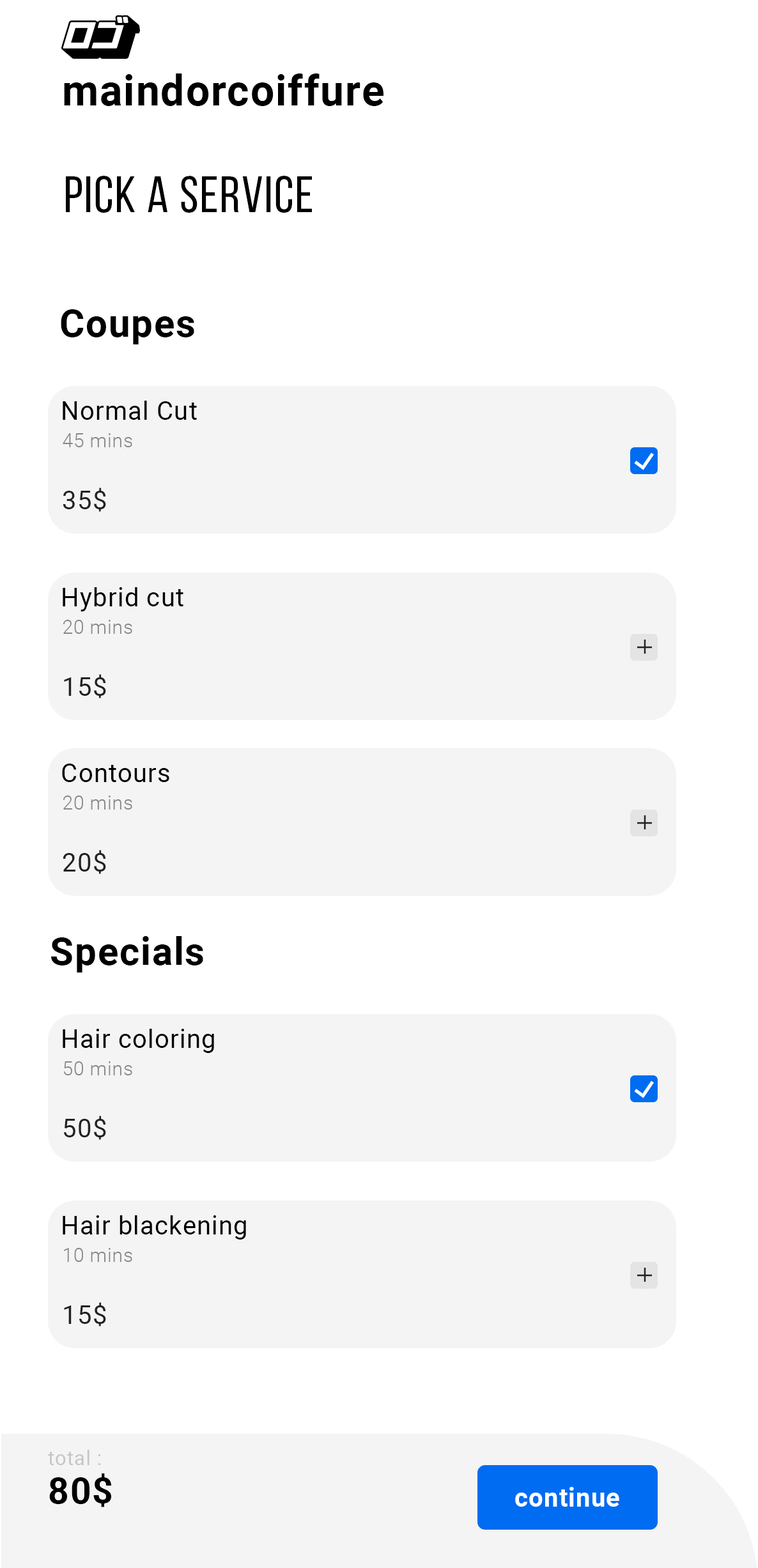
<style>
.page{position:relative;width:758px;height:1568px;background:#ffffff}
.page>*{position:absolute;margin:0}
.t1{font:42.1px "Roboto-Bold";letter-spacing:0.03em;color:#000000}
.t2{font:51.1px "BebasNeueRegular";letter-spacing:0.03em;color:#000000}
.t3{font:38.3px "Roboto-Bold";letter-spacing:0.03em;color:#000000}
.t4{font:25.6px "Roboto-Regular";letter-spacing:0.03em;color:#000000}
.t5{font:19.2px "Roboto-Light";letter-spacing:0.03em;color:#878787}
.t6{font:25.6px "Roboto-Regular";letter-spacing:0.03em;color:#222222}
.t7{font:20.1px "Roboto-Regular";letter-spacing:0.03em;color:#c5c5c5}
.t8{font:36.4px "Roboto-Bold";letter-spacing:0.03em;color:#000000}
.t9{font:25.6px "Roboto-Bold";letter-spacing:0.03em;color:#ffffff}
</style>
<div class="page">
<p class="t1" style="left:64px;top:73px;width:319px;height:33px">maindorcoiffure</p>
<p class="t2" style="left:66px;top:176px;width:246px;height:37px">Pick a service</p>
<p class="t3" style="left:61px;top:309px;width:133px;height:35px">Coupes</p>
<p class="t4" style="left:63px;top:401px;width:134px;height:19px">Normal Cut</p>
<p class="t5" style="left:63px;top:433px;width:69px;height:14px">45 mins</p>
<p class="t6" style="left:63px;top:488px;width:43px;height:24px">35$</p>
<p class="t4" style="left:63px;top:587px;width:120px;height:24px">Hybrid cut</p>
<p class="t5" style="left:63px;top:620px;width:69px;height:14px">20 mins</p>
<p class="t6" style="left:64px;top:674px;width:42px;height:24px">15$</p>
<p class="t4" style="left:62px;top:764px;width:107px;height:18px">Contours</p>
<p class="t5" style="left:63px;top:796px;width:69px;height:14px">20 mins</p>
<p class="t6" style="left:63px;top:850px;width:43px;height:24px">20$</p>
<p class="t3" style="left:51px;top:936px;width:152px;height:36px">Specials</p>
<p class="t4" style="left:63px;top:1029px;width:151px;height:24px">Hair coloring</p>
<p class="t5" style="left:63px;top:1061px;width:69px;height:14px">50 mins</p>
<p class="t6" style="left:64px;top:1116px;width:42px;height:24px">50$</p>
<p class="t4" style="left:63px;top:1215px;width:183px;height:25px">Hair blackening</p>
<p class="t5" style="left:64px;top:1248px;width:68px;height:14px">10 mins</p>
<p class="t6" style="left:64px;top:1302px;width:42px;height:24px">15$</p>
<p class="t7" style="left:48px;top:1450px;width:53px;height:15px">total :</p>
<p class="t8" style="left:49px;top:1473px;width:62px;height:34px">80$</p>
<p class="t9" style="left:515px;top:1487px;width:104px;height:20px">continue</p>
</div>
